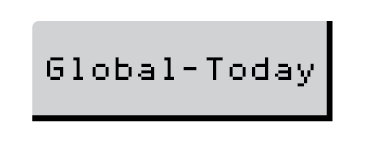
<style>
.page{position:relative;width:375px;height:142px;background:#d1d2d4}
.page>*{position:absolute;margin:0}
.t1{font:26px "Mono0756";color:#000000}
</style>
<div class="page">
<p class="t1" style="left:47px;top:57px;width:267px;height:30px">Global-Today</p>
</div>
